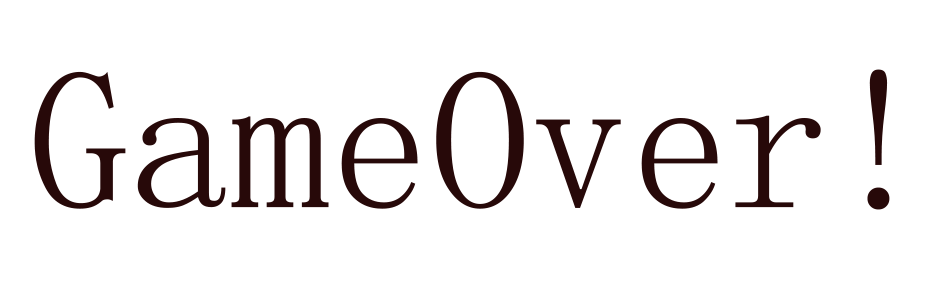
<style>
.page{position:relative;width:930px;height:293px;background:#ffffff}
.page>*{position:absolute;margin:0}
.t1{font:200px "SimSun-ExtB";color:#270909}
</style>
<div class="page">
<p class="t1" style="left:34px;top:69px;width:856px;height:141px">GameOver!</p>
</div>
